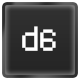
<style>
.page{position:relative;width:80px;height:80px}
.page>*{position:absolute;margin:0}
.t1{font:48px "Kenney-Pixel";color:#ffffff}
</style>
<div class="page">
<p class="t1" style="left:22px;top:26px;width:34px;height:25px">d6</p>
</div>
